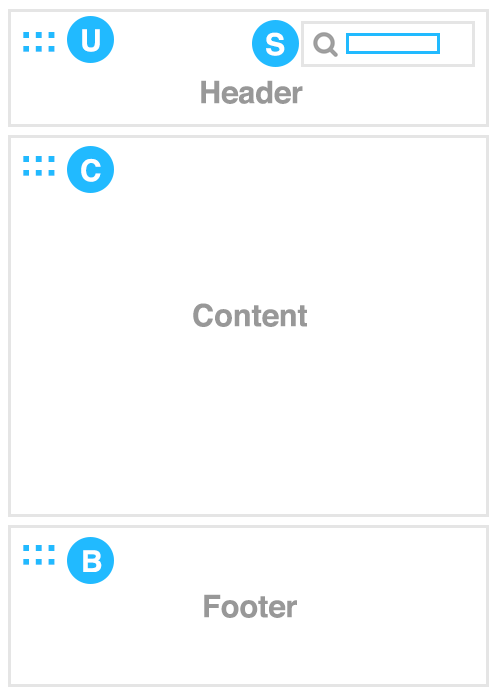
<style>
.page{position:relative;width:500px;height:700px;background:#ffffff}
.page>*{position:absolute;margin:0}
.t1{font:30px "Helvetica-Bold";color:#ffffff}
.t2{font:38px "Helvetica-Bold";color:#21baff}
.t3{font:31px "Helvetica-Bold";color:#989898}
</style>
<div class="page">
<p class="t1" style="left:82px;top:29px;width:18px;height:23px">U</p>
<p class="t2" style="left:23px;top:32px;width:32px;height:20px">:::</p>
<p class="t1" style="left:266px;top:32px;width:19px;height:24px">S</p>
<p class="t3" style="left:201px;top:80px;width:102px;height:24px">Header</p>
<p class="t2" style="left:23px;top:156px;width:32px;height:20px">:::</p>
<p class="t1" style="left:81px;top:158px;width:20px;height:24px">C</p>
<p class="t3" style="left:193px;top:303px;width:114px;height:24px">Content</p>
<p class="t2" style="left:23px;top:545px;width:32px;height:20px">:::</p>
<p class="t1" style="left:83px;top:550px;width:19px;height:22px">B</p>
<p class="t3" style="left:204px;top:594px;width:93px;height:24px">Footer</p>
</div>
